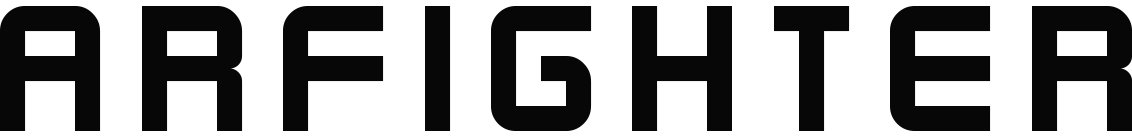
<style>
.page{position:relative;width:1132px;height:137px;background:#ffffff}
.page>*{position:absolute;margin:0}
.t1{font:200px "KenVector-Future-Thin";color:#080707}
</style>
<div class="page">
<p class="t1" style="left:0px;top:6px;width:1132px;height:125px">ARFighter</p>
</div>
